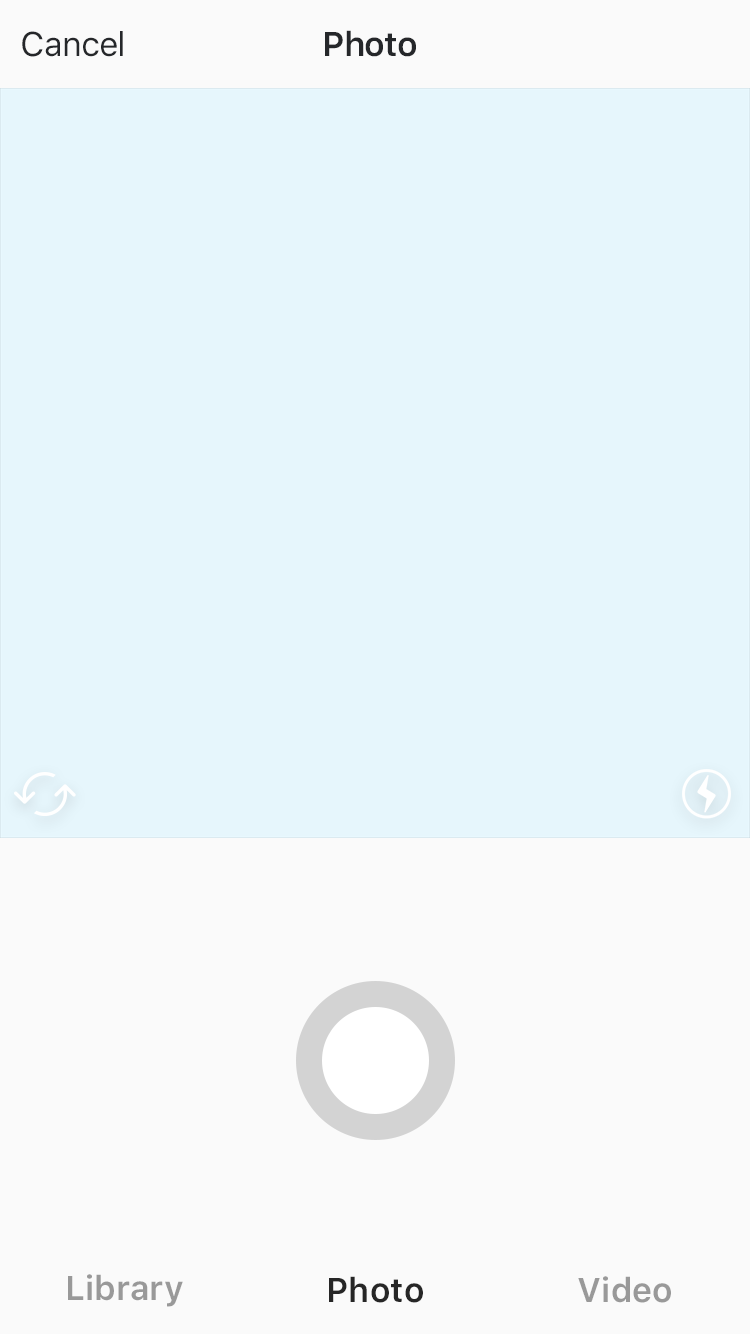
<style>
.page{position:relative;width:750px;height:1334px;background:#e6f6fc}
.page>*{position:absolute;margin:0}
.t1{font:34px "SFUIText-Semibold";letter-spacing:-0.025em;color:#25272a}
.t2{font:34px "SFUIText-Regular";letter-spacing:-0.025em;color:#25272a}
.t3{font:34px "SFUIText-Semibold";color:#999999}
.t4{font:34px "SFUIText-Semibold";color:#262626}
</style>
<div class="page">
<p class="t1" style="left:325px;top:30px;width:91px;height:27px">Photo</p>
<p class="t2" style="left:22px;top:31px;width:101px;height:26px">Cancel</p>
<p class="t3" style="left:68px;top:1274px;width:115px;height:33px">Library</p>
<p class="t4" style="left:329px;top:1276px;width:94px;height:27px">Photo</p>
<p class="t3" style="left:578px;top:1276px;width:93px;height:27px">Video</p>
</div>
